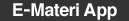
<style>
.page{position:relative;width:129px;height:21px;background:#333333}
.page>*{position:absolute;margin:0}
.t1{font:17.6px "Helvetica-Bold";letter-spacing:-0.025em;color:#ffffff}
.t2{font:17.6px "Tahoma-Bold";letter-spacing:-0.025em;color:#ffffff}
</style>
<div class="page">
<p class="t1" style="left:13px;top:3px;width:104px;height:17px">E<span class="t2">-</span>Materi App</p>
</div>
